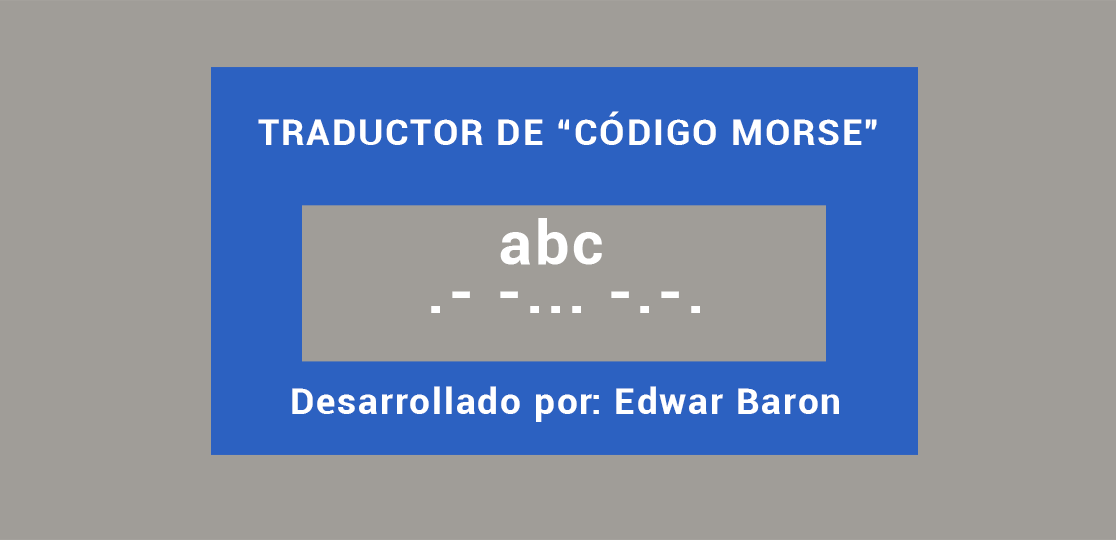
<style>
.page{position:relative;width:1116px;height:540px;background:#a09d98}
.page>*{position:absolute;margin:0}
.t1{font:36.3px "Roboto-Bold";letter-spacing:0.05em;color:#ffffff}
.t2{font:60px "Roboto-Bold";letter-spacing:0.05em;color:#ffffff}
</style>
<div class="page">
<p class="t1" style="left:258px;top:111px;width:619px;height:34px">TRADUCTOR DE “CÓDIGO MORSE”</p>
<p class="t2" style="left:500px;top:218px;width:102px;height:47px">abc</p>
<p class="t2" style="left:431px;top:291px;width:269px;height:22px">.- -... -.-.</p>
<p class="t1" style="left:292px;top:386px;width:547px;height:36px">Desarrollado por: Edwar Baron</p>
</div>
